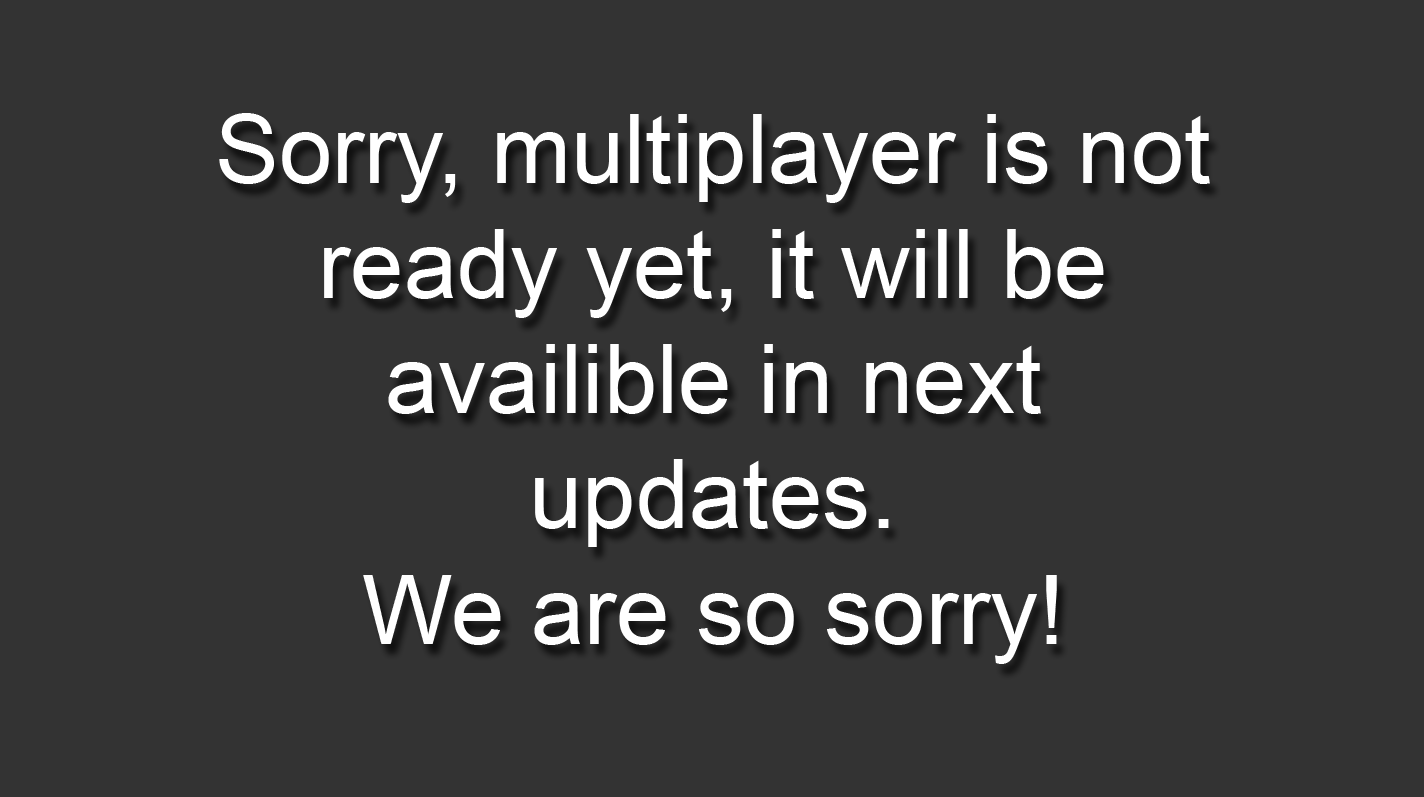
<style>
.page{position:relative;width:1424px;height:797px;background:#333333}
.page>*{position:absolute;margin:0}
.t1{font:96px "ArialMT";color:#ffffff}
</style>
<div class="page">
<p class="t1" style="left:219px;top:113px;width:991px;height:551px;text-align:center">Sorry, multiplayer is not ready yet, it will be <br>availible in next <br>updates.<br>We are so sorry!</p>
</div>
